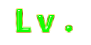
<style>
.page{position:relative;width:91px;height:45px;background:#ffffff}
.page>*{position:absolute;margin:0}
.t1{font:30px "SourceHanSans-Heavy";color:#18ff00}
.t2{font:30px "SourceHanSans-Heavy";color:#13ff00}
.t3{font:30px "SourceHanSans-Heavy";color:#14ff00}
</style>
<div class="page">
<p class="t1" style="left:16px;top:9px;width:15px;height:23px">L</p>
<p class="t2" style="left:37px;top:15px;width:18px;height:17px">v</p>
<p class="t3" style="left:65px;top:25px;width:7px;height:7px">.</p>
</div>
